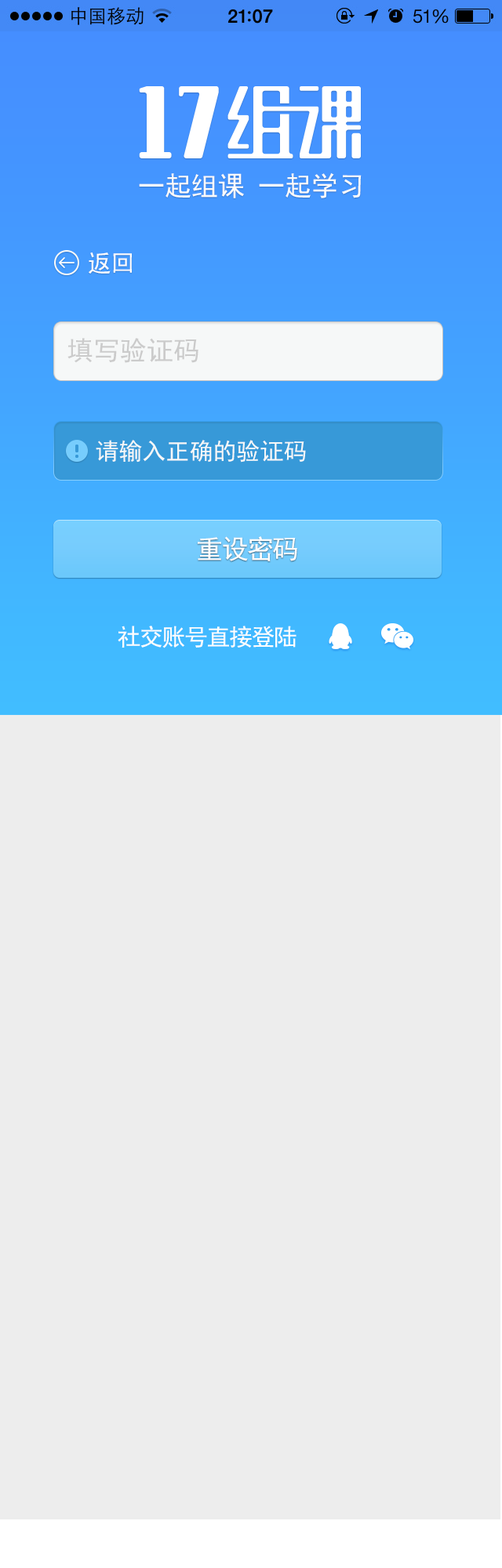
<style>
.page{position:relative;width:502px;height:1568px;background:#ededed}
.page>*{position:absolute;margin:0}
.t1{font:26.7px "SimHei";color:#fbfbfb}
.t2{font:23.5px "SimHei";color:#fefefe}
.t3{font:26.7px "SimHei";color:#cbcbcb}
.t4{font:23.5px "SimHei";color:#f6f8f8}
.t5{font:26.7px "SimHei";letter-spacing:-0.05em;color:#fefefe}
.t6{font:23.5px "SimHei";letter-spacing:-0.05em;color:#fefefe}
</style>
<div class="page">
<p class="t1" style="left:139px;top:172px;width:222px;height:26px">一起组课 一起学习</p>
<p class="t2" style="left:89px;top:252px;width:43px;height:22px">返回</p>
<p class="t3" style="left:67px;top:338px;width:131px;height:25px">填写验证码</p>
<p class="t4" style="left:96px;top:440px;width:210px;height:23px">请输入正确的验证码</p>
<p class="t5" style="left:198px;top:536px;width:99px;height:25px">重设密码</p>
<p class="t6" style="left:118px;top:626px;width:178px;height:22px">社交账号直接登陆</p>
</div>
